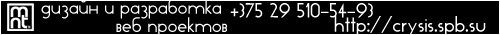
<style>
.page{position:relative;width:500px;height:35px;background:#000000}
.page>*{position:absolute;margin:0}
.t1{font:17px "TickerTape";color:#ffffff}
.t2{font:18px "TickerTape";color:#ffffff}
.t3{font:17.1px "TickerTape";color:#ffffff}
</style>
<div class="page">
<p class="t1" style="left:41px;top:0px;width:180px;height:19px">дизайн и разработка</p>
<p class="t2" style="left:230px;top:3px;width:143px;height:15px">+375 29 510-54-93</p>
<p class="t3" style="left:116px;top:17px;width:111px;height:20px">веб проектов</p>
<p class="t2" style="left:334px;top:16px;width:152px;height:21px">http://crysis.spb.su</p>
</div>
